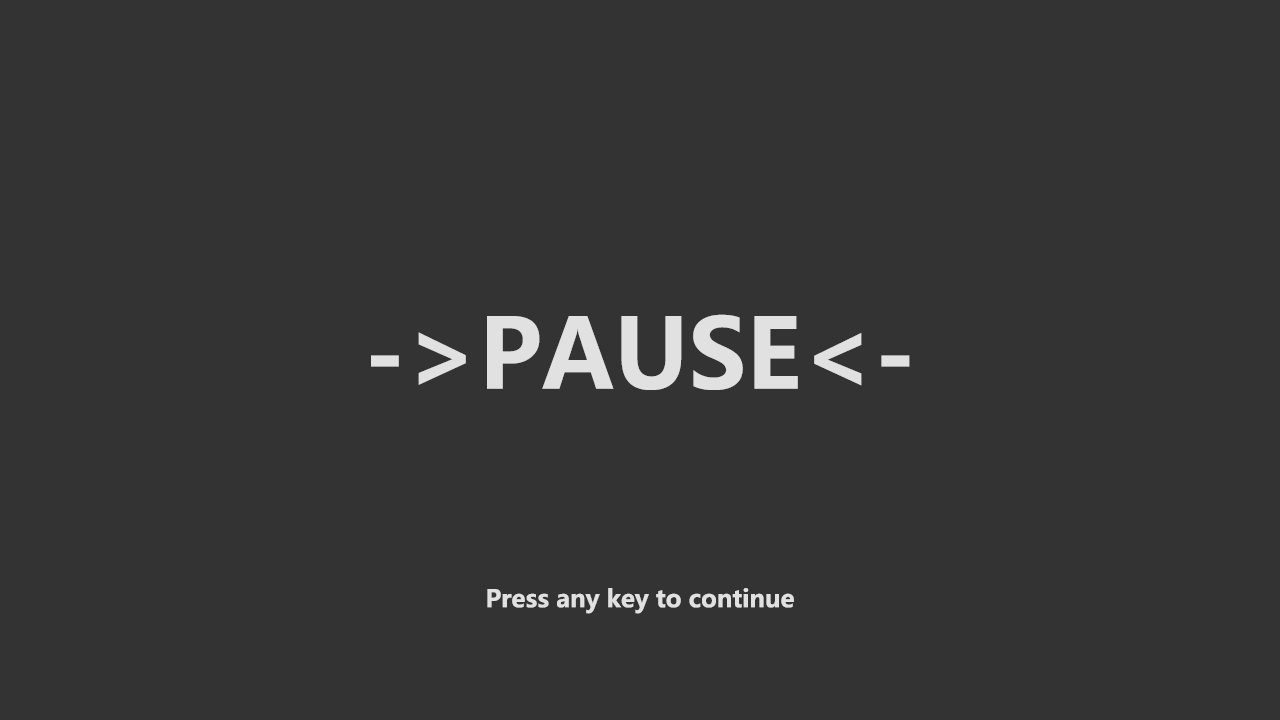
<style>
.page{position:relative;width:1280px;height:720px;background:#333333}
.page>*{position:absolute;margin:0}
.t1{font:96px "MicrosoftYaHei-Bold";color:#e1e1e1}
.t2{font:24px "MicrosoftYaHei-Bold";color:#e1e1e1}
</style>
<div class="page">
<p class="t1" style="left:371px;top:314px;width:539px;height:76px">-&gt;PAUSE&lt;-</p>
<p class="t2" style="left:487px;top:588px;width:307px;height:26px">Press any key to continue</p>
</div>
